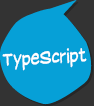
<style>
.page{position:relative;width:94px;height:106px;background:#06a0d7}
.page>*{position:absolute;margin:0}
.t1{font:20px "SuplexmentaryComicNC";color:#ffffff;scale:0.8 1}
</style>
<div class="page">
<p class="t1" style="left:2px;top:48px;width:85px;height:23px;rotate:-3deg">TypeScript</p>
</div>
